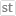
<style>
.page{position:relative;width:16px;height:16px;background:#ffffff}
.page>*{position:absolute;margin:0}
.t1{font:15px "Constantia";color:#7f7f7f}
</style>
<div class="page">
<p class="t1" style="left:2px;top:3px;width:11px;height:9px">st</p>
</div>
